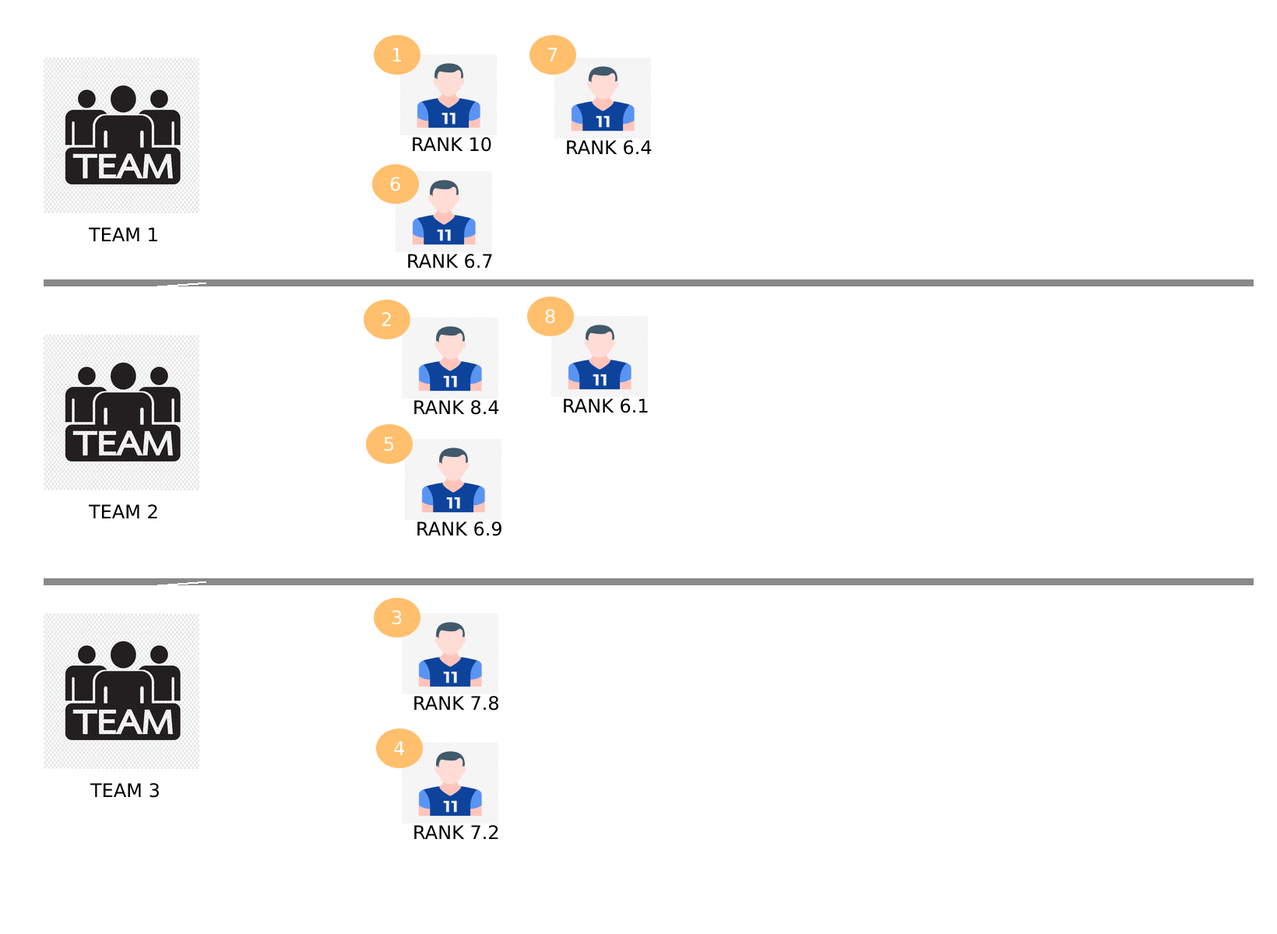
<style>
.page{position:relative;width:1277px;height:934px;background:#ffffff}
.page>*{position:absolute;margin:0}
.t1{font:18.7px "DejaVuSans";color:#ffffff}
.t2{font:18.7px "DejaVuSans";color:#000000}
</style>
<div class="page">
<p class="t1" style="left:392px;top:47px;width:10px;height:14px">1</p>
<p class="t1" style="left:547px;top:47px;width:10px;height:14px">7</p>
<p class="t2" style="left:413px;top:137px;width:78px;height:15px">RANK 10</p>
<p class="t2" style="left:567px;top:140px;width:85px;height:15px">RANK 6.4</p>
<p class="t1" style="left:390px;top:177px;width:10px;height:14px">6</p>
<p class="t2" style="left:88px;top:227px;width:69px;height:14px">TEAM 1</p>
<p class="t2" style="left:408px;top:254px;width:84px;height:15px">RANK 6.7</p>
<p class="t1" style="left:381px;top:312px;width:10px;height:14px">2</p>
<p class="t1" style="left:545px;top:309px;width:10px;height:15px">8</p>
<p class="t2" style="left:414px;top:400px;width:85px;height:15px">RANK 8.4</p>
<p class="t1" style="left:384px;top:437px;width:10px;height:14px">5</p>
<p class="t2" style="left:88px;top:504px;width:69px;height:14px">TEAM 2</p>
<p class="t2" style="left:417px;top:522px;width:84px;height:14px">RANK 6.9</p>
<p class="t1" style="left:392px;top:610px;width:10px;height:15px">3</p>
<p class="t2" style="left:414px;top:696px;width:84px;height:15px">RANK 7.8</p>
<p class="t1" style="left:394px;top:741px;width:10px;height:14px">4</p>
<p class="t2" style="left:90px;top:783px;width:69px;height:15px">TEAM 3</p>
<p class="t2" style="left:414px;top:825px;width:84px;height:14px">RANK 7.2</p>
</div>
